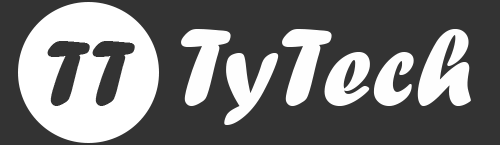
<style>
.page{position:relative;width:500px;height:145px;background:#333333}
.page>*{position:absolute;margin:0}
.t1{font:113.8px "ForteMT";color:#fefefe}
.t2{font:97px "ForteMT";color:#333333}
</style>
<div class="page">
<p class="t1" style="left:181px;top:29px;width:290px;height:96px">TyTech</p>
<p class="t2" style="left:47px;top:41px;width:88px;height:65px">TT</p>
</div>
